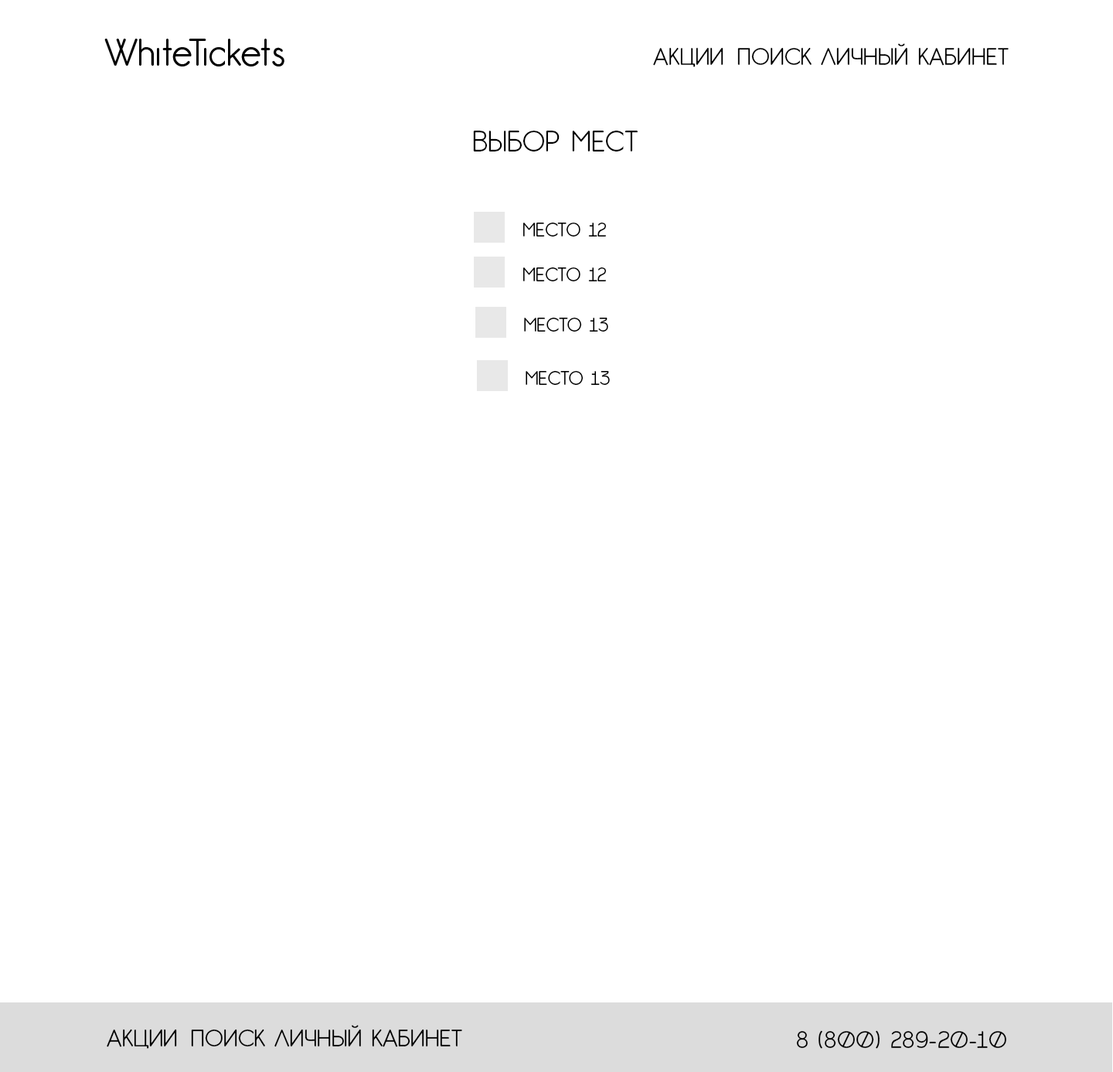
<style>
.page{position:relative;width:1113px;height:1072px;background:#ffffff}
.page>*{position:absolute;margin:0}
.t1{font:23.2px "GardensC";color:#000000}
.t2{font:27.8px "GardensC";color:#000000}
.t3{font:18.5px "GardensC";color:#000000}
</style>
<div class="page">
<p class="t1" style="left:653px;top:43px;width:355px;height:24px">АКЦИИ ПОИСК ЛИЧНЫЙ КАБИНЕТ</p>
<p class="t2" style="left:473px;top:131px;width:164px;height:20px">ВЫБОР МЕСТ</p>
<p class="t3" style="left:523px;top:223px;width:83px;height:13px">МЕСТО 12</p>
<p class="t3" style="left:523px;top:267px;width:83px;height:14px">МЕСТО 12</p>
<p class="t3" style="left:524px;top:318px;width:84px;height:13px">МЕСТО 13</p>
<p class="t3" style="left:525px;top:371px;width:85px;height:14px">МЕСТО 13</p>
<p class="t1" style="left:107px;top:1025px;width:355px;height:24px">АКЦИИ ПОИСК ЛИЧНЫЙ КАБИНЕТ</p>
<p class="t1" style="left:796px;top:1030px;width:210px;height:19px">8 (800) 289-20-10</p>
</div>
